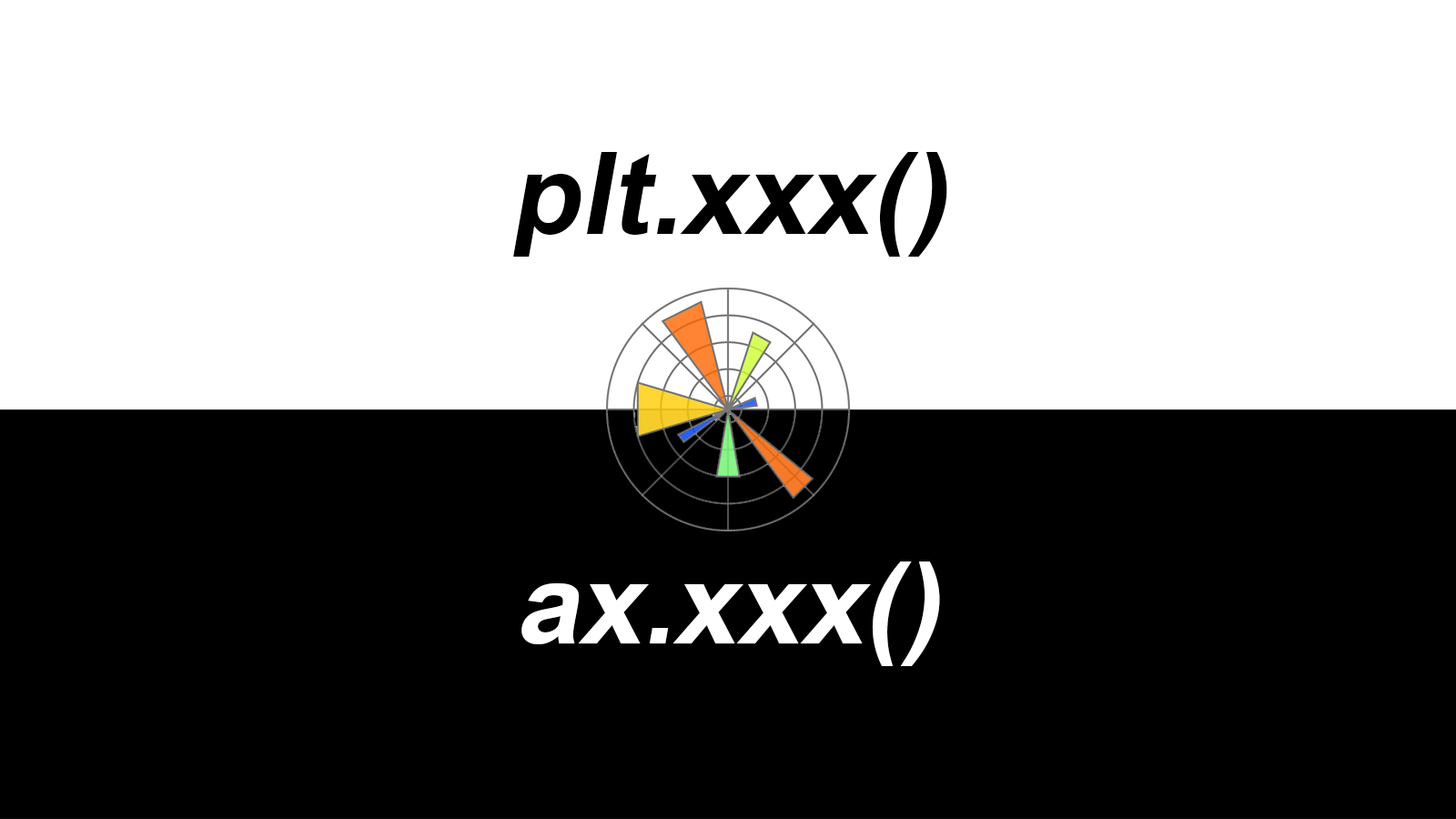
<style>
.page{position:relative;width:1456px;height:819px;background:#000000}
.page>*{position:absolute;margin:0}
.t1{font:113.7px "Arial-BoldMT";color:#000000;font-style:italic}
.t2{font:113.7px "Arial-BoldMT";color:#ffffff;font-style:italic}
</style>
<div class="page">
<p class="t1" style="left:513px;top:152px;width:434px;height:105px">plt.xxx()</p>
<p class="t2" style="left:521px;top:561px;width:419px;height:105px">ax.xxx()</p>
</div>
